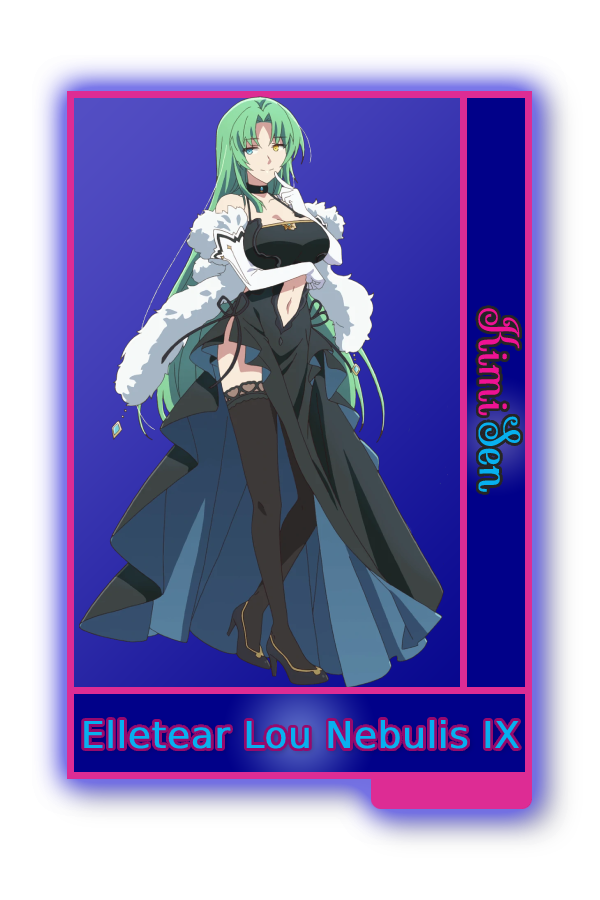
<style>
.page{position:relative;width:600px;height:900px;background:#ffffff}
.page>*{position:absolute;margin:0}
.t1{font:48.8px "Sevillana-Regular";color:#ee1294;font-weight:bold}
.t2{font:48.8px "Sevillana-Regular";color:#07b0ef;font-weight:bold}
.t3{font:37px "CoolveticaRg-Regular";color:#07b0ef;font-weight:bold}
</style>
<div class="page">
<p class="t1" style="left:478px;top:308px;width:43px;height:184px;rotate:90deg">Kimi<span class="t2">Sen</span></p>
<p class="t3" style="left:84px;top:719px;width:436px;height:30px">Elletear Lou Nebulis IX</p>
</div>
